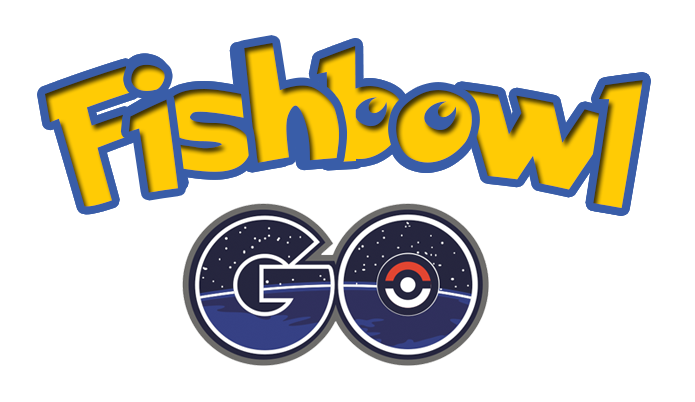
<style>
.page{position:relative;width:695px;height:402px;background:#ffffff}
.page>*{position:absolute;margin:0}
.t1{font:123.9px "PokemonSolidNormal";color:#ffcb05}
</style>
<div class="page">
<p class="t1" style="left:45px;top:44px;width:598px;height:164px">Fishbowl</p>
<p class="t1" style="left:45px;top:44px;width:598px;height:164px">Fishbowl</p>
<p class="t1" style="left:244px;top:43px;width:96px;height:120px">h</p>
<p class="t1" style="left:128px;top:64px;width:51px;height:129px">i</p>
<p class="t1" style="left:593px;top:80px;width:50px;height:128px">l</p>
<p class="t1" style="left:396px;top:90px;width:76px;height:73px">o</p>
</div>
